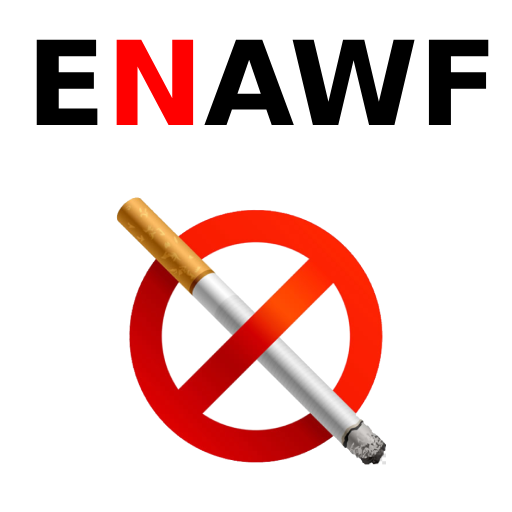
<style>
.page{position:relative;width:512px;height:512px;background:#ffffff}
.page>*{position:absolute;margin:0}
.t1{font:117px "DejaVuSans-Bold";color:#000000}
.t2{font:117px "DejaVuSans-Bold";color:#ff0000}
</style>
<div class="page">
<p class="t1" style="left:36px;top:39px;width:453px;height:86px">E<span class="t2">N</span>AWF</p>
</div>
